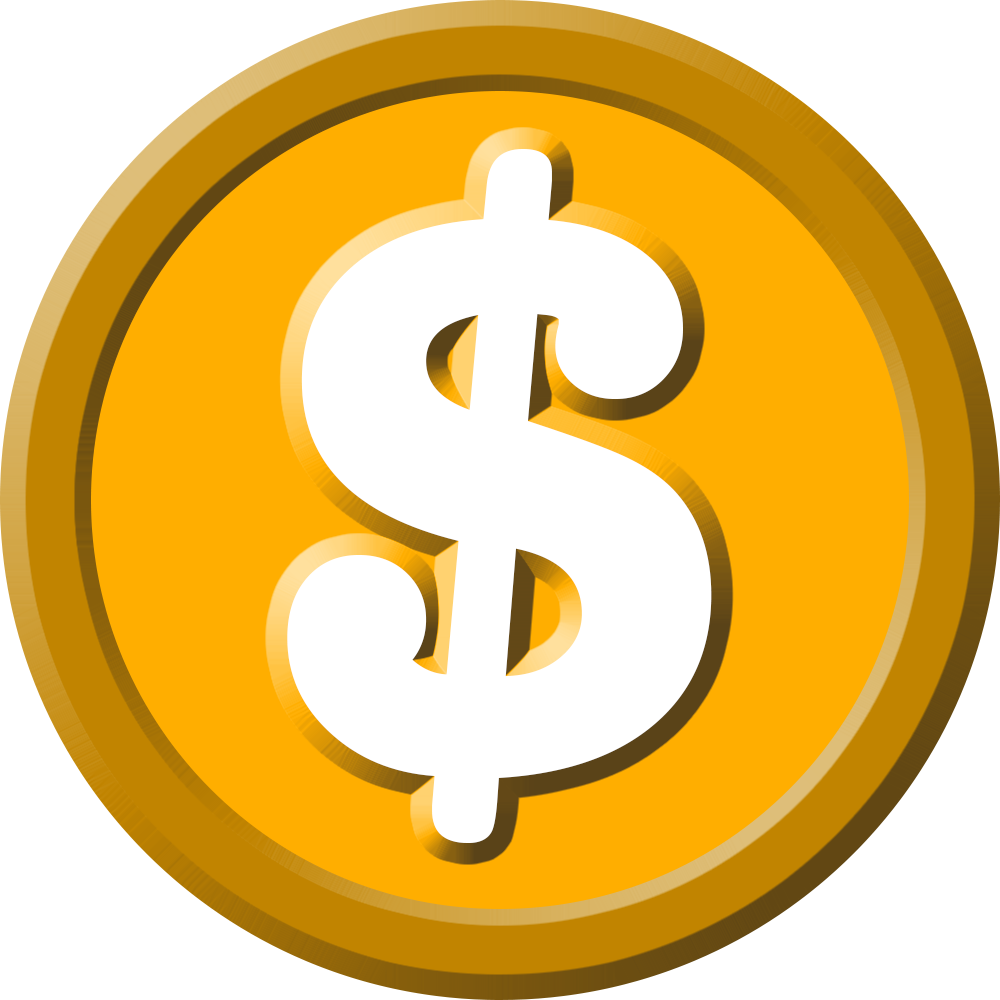
<style>
.page{position:relative;width:1000px;height:1000px;background:#ffffff}
.page>*{position:absolute;margin:0}
.t1{font:856.2px "AmericanTypewriter-Bold";letter-spacing:-0.05em;color:#ffffff}
</style>
<div class="page">
<p class="t1" style="left:287px;top:149px;width:425px;height:694px">$</p>
</div>
